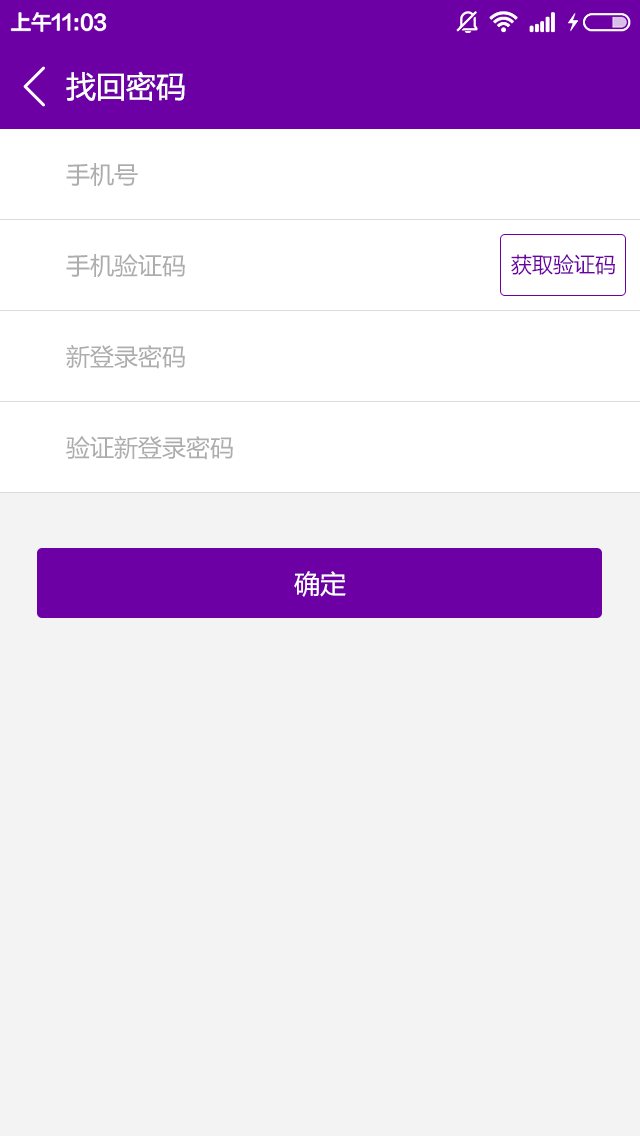
<style>
.page{position:relative;width:640px;height:1136px;background:#f3f3f3}
.page>*{position:absolute;margin:0}
.t1{font:30px "MicrosoftYaHei";color:#ffffff}
.t2{font:24px "MicrosoftYaHei";color:#adadad}
.t3{font:21px "MicrosoftYaHei";color:#6d00a5}
.t4{font:26px "MicrosoftYaHei";color:#ffffff}
</style>
<div class="page">
<p class="t1" style="left:66px;top:71px;width:119px;height:30px">找回密码</p>
<p class="t2" style="left:66px;top:163px;width:72px;height:24px">手机号</p>
<p class="t2" style="left:66px;top:254px;width:119px;height:24px">手机验证码</p>
<p class="t3" style="left:511px;top:254px;width:104px;height:21px">获取验证码</p>
<p class="t2" style="left:66px;top:344px;width:119px;height:25px">新登录密码</p>
<p class="t2" style="left:66px;top:435px;width:167px;height:25px">验证新登录密码</p>
<p class="t4" style="left:294px;top:571px;width:52px;height:26px">确定</p>
</div>
